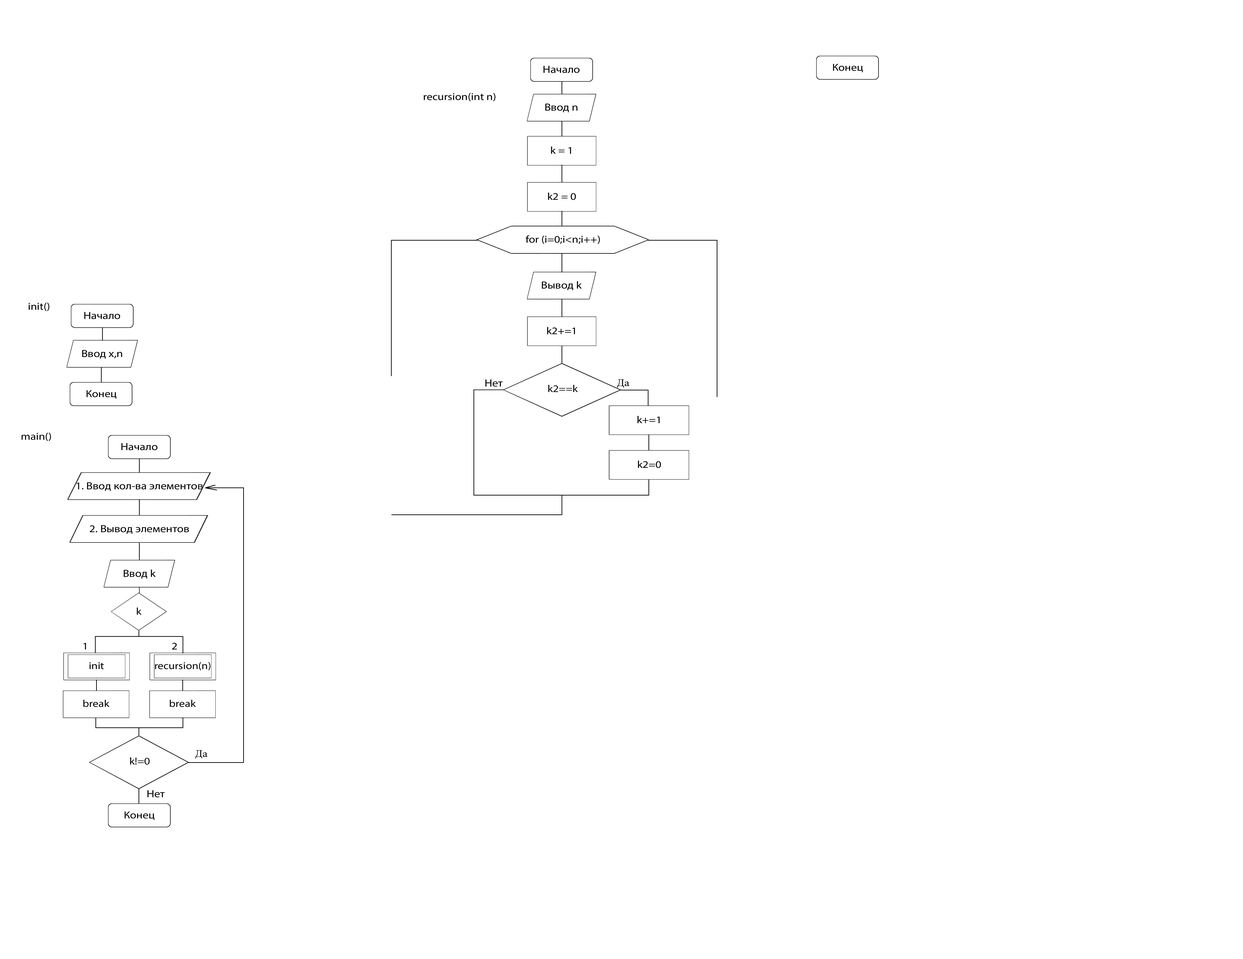
<style>
.page{position:relative;width:1243px;height:959px;background:#ffffff}
.page>*{position:absolute;margin:0}
.t1{font:10.3px "MyriadPro-Regular";color:#000000;scale:1.14 1}
.t2{font:10.1px "MyriadPro-Regular";color:#000000;scale:1.14 1}
.t3{font:10.3px "MyriadPro-Regular";color:#000000;scale:1.13 1}
.t4{font:10px "MyriadPro-Regular";color:#000000;scale:1.14 1}
.t5{font:10.4px "MyriadPro-Regular";color:#000000;scale:1.13 1}
</style>
<div class="page">
<p class="t1" style="left:543px;top:66px;width:37px;height:7px">Начало</p>
<p class="t2" style="left:833px;top:64px;width:30px;height:8px">Конец</p>
<p class="t2" style="left:424px;top:93px;width:71px;height:8px">recursion(int n)</p>
<p class="t1" style="left:545px;top:104px;width:32px;height:8px">Ввод n</p>
<p class="t2" style="left:551px;top:146px;width:20px;height:8px">k = 1</p>
<p class="t2" style="left:548px;top:192px;width:28px;height:8px">k2 = 0</p>
<p class="t2" style="left:526px;top:235px;width:74px;height:9px">for (i=0;i&lt;n;i++)</p>
<p class="t1" style="left:542px;top:281px;width:40px;height:9px">Вывод k</p>
<p class="t2" style="left:29px;top:303px;width:20px;height:8px">init()</p>
<p class="t1" style="left:84px;top:312px;width:36px;height:7px">Начало</p>
<p class="t2" style="left:547px;top:327px;width:28px;height:7px">k2+=1</p>
<p class="t1" style="left:82px;top:350px;width:40px;height:9px">Ввод x,n</p>
<p class="t3" style="left:485px;top:379px;width:18px;height:8px">Нет</p>
<p class="t2" style="left:548px;top:385px;width:30px;height:7px">k2==k</p>
<p class="t2" style="left:86px;top:390px;width:30px;height:9px">Конец</p>
<p class="t2" style="left:637px;top:416px;width:23px;height:7px">k+=1</p>
<p class="t2" style="left:21px;top:433px;width:30px;height:8px">main()</p>
<p class="t1" style="left:121px;top:443px;width:36px;height:7px">Начало</p>
<p class="t2" style="left:638px;top:461px;width:23px;height:7px">k2=0</p>
<p class="t1" style="left:77px;top:482px;width:126px;height:9px">1. Ввод кол-ва элементов</p>
<p class="t1" style="left:90px;top:525px;width:99px;height:9px">2. Вывод элементов</p>
<p class="t1" style="left:124px;top:570px;width:32px;height:9px">Ввод k</p>
<p class="t2" style="left:137px;top:607px;width:5px;height:8px">k</p>
<p class="t2" style="left:83px;top:643px;width:3px;height:7px">1</p>
<p class="t2" style="left:172px;top:643px;width:5px;height:7px">2</p>
<p class="t4" style="left:89px;top:662px;width:15px;height:7px">init</p>
<p class="t4" style="left:155px;top:662px;width:55px;height:9px">recursion(n)</p>
<p class="t4" style="left:83px;top:700px;width:27px;height:7px">break</p>
<p class="t4" style="left:170px;top:700px;width:26px;height:7px">break</p>
<p class="t2" style="left:130px;top:757px;width:20px;height:8px">k!=0</p>
<p class="t5" style="left:147px;top:790px;width:18px;height:8px">Нет</p>
<p class="t2" style="left:124px;top:812px;width:30px;height:8px">Конец</p>
</div>
